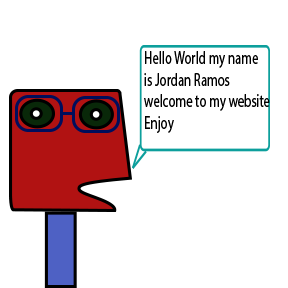
<style>
.page{position:relative;width:288px;height:288px;background:#ffffff}
.page>*{position:absolute;margin:0}
.t1{font:18.1px "MyriadPro-Regular";color:#000000;scale:0.71 1}
</style>
<div class="page">
<p class="t1" style="left:144px;top:51px;width:126px;height:82px">Hello World my name<br>is Jordan Ramos <br>welcome to my website<br>Enjoy</p>
</div>
